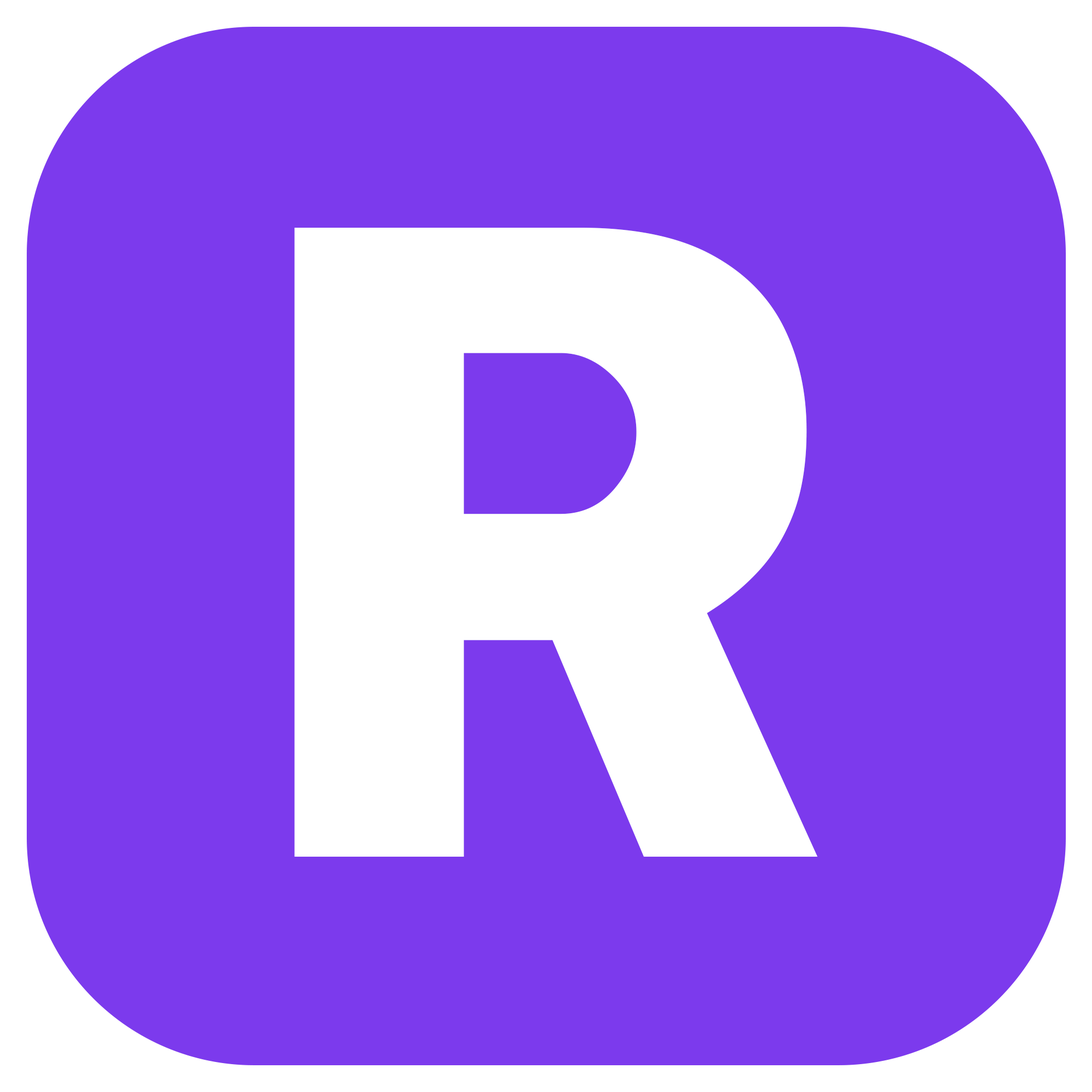
<style>
.page{position:relative;width:1092px;height:1092px;background:#7c3aed}
.page>*{position:absolute;margin:0}
.t1{font:869.9px "PublicSans-Black";color:#ffffff}
</style>
<div class="page">
<p class="t1" style="left:294px;top:228px;width:524px;height:629px">R</p>
</div>
